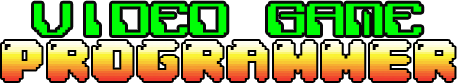
<style>
.page{position:relative;width:457px;height:83px;background:#ffffff}
.page>*{position:absolute;margin:0}
.t1{font:41.5px "Polix-Mono";color:#00ff06}
</style>
<div class="page">
<p class="t1" style="left:34px;top:3px;width:388px;height:32px">Video Game</p>
</div>
